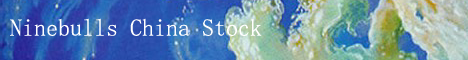
<style>
.page{position:relative;width:468px;height:60px}
.page>*{position:absolute;margin:0}
.t1{font:24px "YouYuan";color:#ffffff}
</style>
<div class="page">
<p class="t1" style="left:10px;top:18px;width:252px;height:18px">Ninebulls China Stock</p>
</div>
